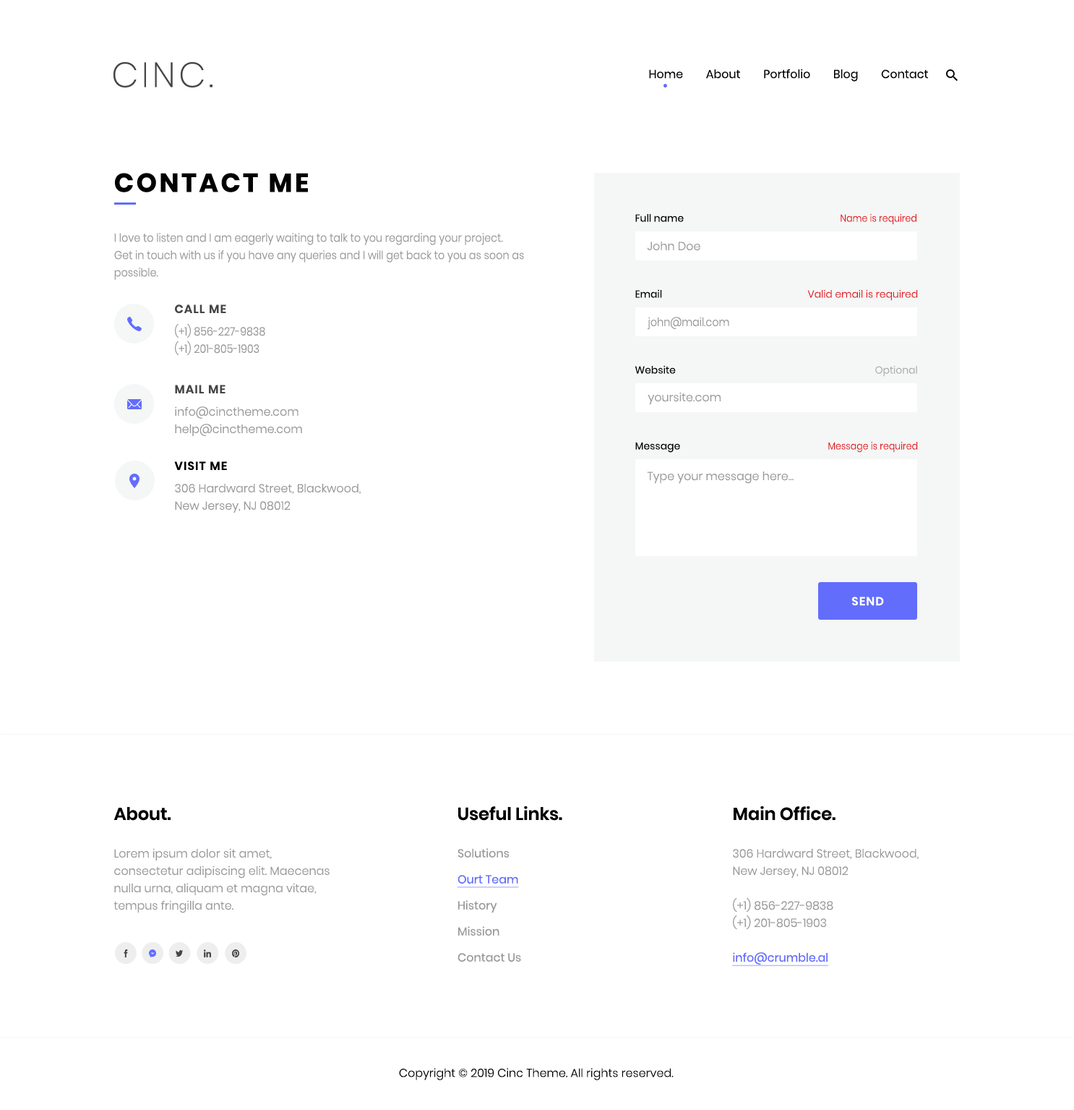
<style>
.page{position:relative;width:1074px;height:1110px;background:#ffffff}
.page>*{position:absolute;margin:0}
.t1{font:35px "Poppins-ExtraLight";letter-spacing:0.1em;color:#454545}
.t2{font:11.7px "Poppins-Regular";color:#000000}
.t3{font:26px "Poppins-Bold";letter-spacing:0.1em;color:#010101;text-transform:uppercase}
.t4{font:10.1px "Poppins-Regular";color:#000000}
.t5{font:10.1px "Poppins-Light";color:#e31e24;scale:0.9 1}
.t6{font:11.6px/17.4px "Poppins-Light";color:#999999;scale:0.9 1}
.t7{font:11.6px "Poppins-Light";color:#999999}
.t8{font:10.1px "Poppins-Light";color:#e31e24}
.t9{font:11.6px "Poppins-SemiBold";letter-spacing:0.075em;color:#454545}
.t10{font:11.6px "Poppins-Light";color:#999999;scale:0.9 1}
.t11{font:10.1px "Poppins-Light";color:#ababab}
.t12{font:11.6px/17.4px "Poppins-Light";color:#999999}
.t13{font:10.1px "Poppins-Regular";color:#010101}
.t14{font:11.6px "Poppins-SemiBold";letter-spacing:0.075em;color:#000000}
.t15{font:11.6px "Poppins-SemiBold";letter-spacing:0.075em;color:#fefefe}
.t16{font:17.4px "Poppins-SemiBold";color:#010101}
.t17{font:11.6px/26px "Poppins-Regular";color:#999999}
.t18{font:11.6px/26px "Poppins-Regular";color:#626dfc;text-decoration:underline}
.t19{font:11.6px/17.4px "Poppins-Regular";color:#626dfc;text-decoration:underline}
.t20{font:11.6px "Poppins-Light";color:#000000}
</style>
<div class="page">
<p class="t1" style="left:114px;top:61px;width:99px;height:26px">CINC.</p>
<p class="t2" style="left:649px;top:69px;width:279px;height:13px">Home        About        Portfolio        Blog        Contact</p>
<p class="t3" style="left:115px;top:173px;width:193px;height:19px">Contact Me</p>
<p class="t4" style="left:636px;top:214px;width:48px;height:8px">Full name</p>
<p class="t5" style="left:841px;top:213px;width:76px;height:12px">Name is required</p>
<p class="t6" style="left:114px;top:233px;width:410px;height:47px">I love to listen and I am eagerly waiting to talk to you regarding your project. <br>Get in touch with us if you have any queries and I will get back to you as soon as <br>possible.</p>
<p class="t7" style="left:647px;top:241px;width:54px;height:10px">John Doe</p>
<p class="t4" style="left:636px;top:289px;width:26px;height:9px">Email</p>
<p class="t8" style="left:808px;top:289px;width:110px;height:12px">Valid email is required</p>
<p class="t9" style="left:175px;top:304px;width:51px;height:9px">CALL ME</p>
<p class="t10" style="left:648px;top:317px;width:82px;height:13px">john@mail.com</p>
<p class="t6" style="left:175px;top:324px;width:90px;height:31px">(+1) 856-227-9838<br>(+1) 201-805-1903</p>
<p class="t4" style="left:635px;top:365px;width:41px;height:9px">Website</p>
<p class="t11" style="left:876px;top:365px;width:42px;height:12px">Optional</p>
<p class="t9" style="left:175px;top:385px;width:51px;height:8px">MAIL ME</p>
<p class="t7" style="left:648px;top:392px;width:73px;height:13px">yoursite.com</p>
<p class="t12" style="left:175px;top:406px;width:127px;height:30px">info@cinctheme.com<br>help@cinctheme.com</p>
<p class="t13" style="left:636px;top:442px;width:44px;height:11px">Message</p>
<p class="t5" style="left:829px;top:441px;width:89px;height:12px">Message is required</p>
<p class="t14" style="left:174px;top:461px;width:53px;height:9px">VISIT ME</p>
<p class="t7" style="left:647px;top:471px;width:147px;height:13px">Type your message here...</p>
<p class="t12" style="left:175px;top:484px;width:186px;height:29px">306 Hardward Street, Blackwood,<br>New Jersey, NJ 08012</p>
<p class="t15" style="left:852px;top:596px;width:32px;height:10px">SEND</p>
<p class="t16" style="left:114px;top:807px;width:57px;height:14px">About.</p>
<p class="t16" style="left:458px;top:805px;width:105px;height:16px">Useful Links.</p>
<p class="t16" style="left:734px;top:805px;width:102px;height:16px">Main Office.</p>
<p class="t12" style="left:114px;top:848px;width:216px;height:65px">Lorem ipsum dolor sit amet, consectetur adipiscing elit. Maecenas nulla urna, aliquam et magna vitae, tempus fringilla ante.</p>
<p class="t17" style="left:458px;top:848px;width:63px;height:114px">Solutions<br><span class="t18">Ourt Team<br></span>History<br>Mission<br>Contact Us</p>
<p class="t12" style="left:732px;top:848px;width:187px;height:118px">306 Hardward Street, Blackwood,<br>New Jersey, NJ 08012<br><br>(+1) 856-227-9838<br>(+1) 201-805-1903<br><br><span class="t19">info@crumble.al</span></p>
<p class="t20" style="left:399px;top:1068px;width:275px;height:12px">Copyright © 2019 Cinc Theme. All rights reserved.</p>
</div>
